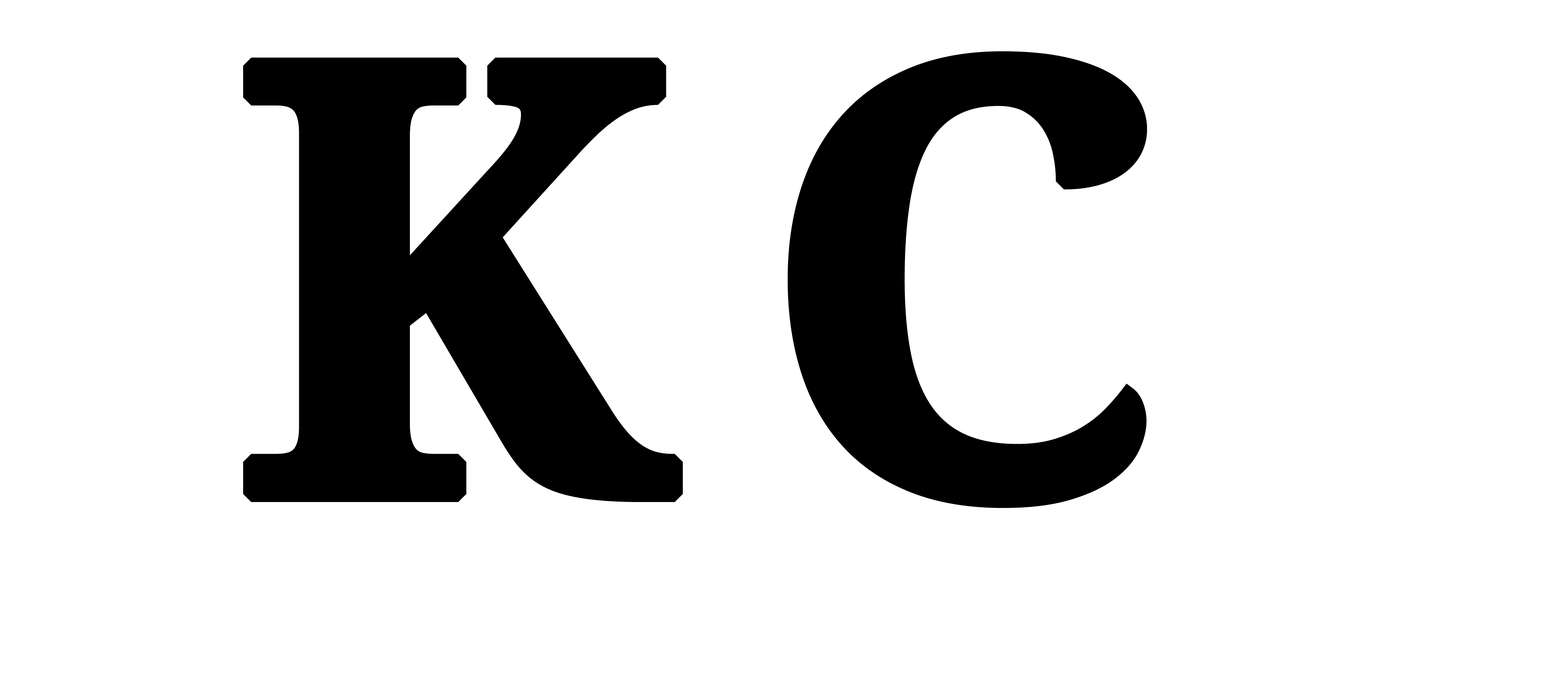
<style>
.page{position:relative;width:1568px;height:694px;background:#ffffff}
.page>*{position:absolute;margin:0}
.t1{font:599.5px "DroidSerif-Bold";letter-spacing:0.12em;color:#000000;font-weight:bold}
</style>
<div class="page">
<p class="t1" style="left:243px;top:51px;width:904px;height:457px">KC</p>
</div>
